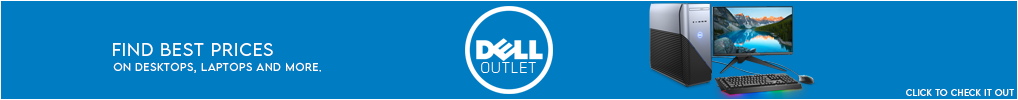
<style>
.page{position:relative;width:1018px;height:100px;background:#007cc2}
.page>*{position:absolute;margin:0}
.t1{font:16.2px "LEMONMILK-Light";letter-spacing:0.07em;color:#ffffff}
.t2{font:10px "LEMONMILK-Light";letter-spacing:0.07em;color:#ffffff}
.t3{font:14.5px "UniSansThinCAPS";letter-spacing:0.07em;color:#ffffff}
.t4{font:8px "LEMONMILK-Light";letter-spacing:0.07em;color:#ffffff}
</style>
<div class="page">
<p class="t1" style="left:113px;top:43px;width:160px;height:13px">find best prices</p>
<p class="t2" style="left:113px;top:62px;width:208px;height:11px">oN DESKTOPS, LAPTOPS AND MORE.</p>
<p class="t3" style="left:481px;top:62px;width:55px;height:11px">outlet</p>
<p class="t4" style="left:906px;top:89px;width:108px;height:7px">CLICK TO CHECK IT OUT</p>
</div>
